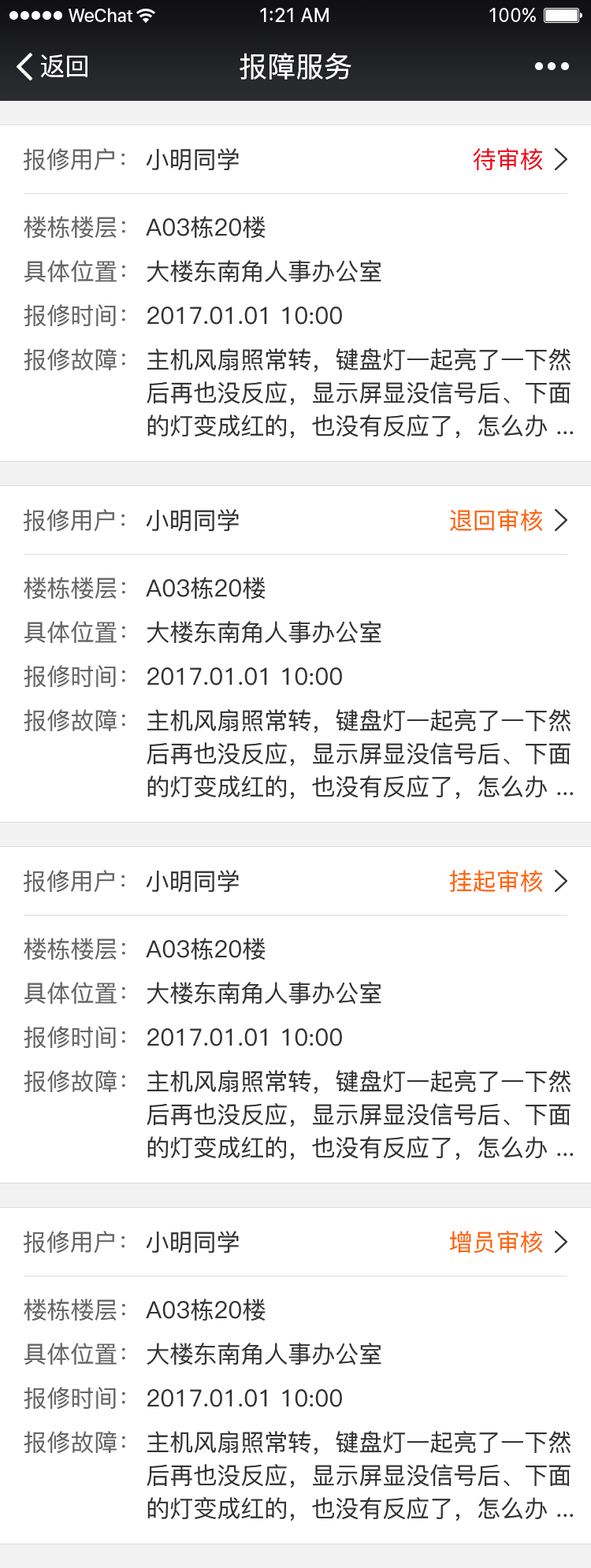
<style>
.page{position:relative;width:591px;height:1568px;background:#ffffff}
.page>*{position:absolute;margin:0}
.t1{font:28.4px "PingFang-SC-Medium";color:#ffffff}
.t2{font:25.2px "PingFang-SC-Medium";color:#ffffff}
.t3{font:23.6px "PingFang-SC-Medium";color:#666666}
.t4{font:23.6px "PingFang-SC-Medium";color:#333333}
.t5{font:23.6px "PingFang-SC-Medium";color:#f10215}
.t6{font:23.6px/44.1px "PingFang-SC-Medium";color:#666666}
.t7{font:23.6px/44.1px "PingFang-SC-Medium";color:#333333}
.t8{font:23.6px/33.1px "PingFang-SC-Medium";color:#333333}
.t9{font:23.6px "PingFang-SC-Medium";color:#ff6405}
</style>
<div class="page">
<p class="t1" style="left:240px;top:53px;width:111px;height:27px">报障服务</p>
<p class="t2" style="left:41px;top:54px;width:46px;height:24px">返回</p>
<p class="t3" style="left:23px;top:148px;width:101px;height:23px">报修用户：</p>
<p class="t4" style="left:146px;top:148px;width:93px;height:23px">小明同学</p>
<p class="t5" style="left:473px;top:148px;width:70px;height:22px">待审核</p>
<p class="t6" style="left:24px;top:216px;width:101px;height:155px">楼栋楼层：<br>具体位置：<br>报修时间：<br>报修故障：</p>
<p class="t7" style="left:146px;top:216px;width:428px;height:222px">A03栋20楼<br>大楼东南角人事办公室<br>2017.01.01 10:00<br>主机风扇照常转，键盘灯一起亮了一下然<br><span class="t8">后再也没反应，显示屏显没信号后、下面<br>的灯变成红的，也没有反应了，怎么办 ...</span></p>
<p class="t3" style="left:23px;top:509px;width:101px;height:23px">报修用户：</p>
<p class="t4" style="left:146px;top:509px;width:93px;height:23px">小明同学</p>
<p class="t9" style="left:450px;top:509px;width:93px;height:22px">退回审核</p>
<p class="t6" style="left:24px;top:577px;width:101px;height:155px">楼栋楼层：<br>具体位置：<br>报修时间：<br>报修故障：</p>
<p class="t7" style="left:146px;top:577px;width:428px;height:222px">A03栋20楼<br>大楼东南角人事办公室<br>2017.01.01 10:00<br>主机风扇照常转，键盘灯一起亮了一下然<br><span class="t8">后再也没反应，显示屏显没信号后、下面<br>的灯变成红的，也没有反应了，怎么办 ...</span></p>
<p class="t3" style="left:23px;top:870px;width:101px;height:23px">报修用户：</p>
<p class="t4" style="left:146px;top:870px;width:93px;height:23px">小明同学</p>
<p class="t9" style="left:450px;top:870px;width:93px;height:22px">挂起审核</p>
<p class="t6" style="left:24px;top:938px;width:101px;height:155px">楼栋楼层：<br>具体位置：<br>报修时间：<br>报修故障：</p>
<p class="t7" style="left:146px;top:938px;width:428px;height:222px">A03栋20楼<br>大楼东南角人事办公室<br>2017.01.01 10:00<br>主机风扇照常转，键盘灯一起亮了一下然<br><span class="t8">后再也没反应，显示屏显没信号后、下面<br>的灯变成红的，也没有反应了，怎么办 ...</span></p>
<p class="t3" style="left:23px;top:1231px;width:101px;height:23px">报修用户：</p>
<p class="t4" style="left:146px;top:1231px;width:93px;height:23px">小明同学</p>
<p class="t9" style="left:450px;top:1231px;width:93px;height:23px">增员审核</p>
<p class="t6" style="left:24px;top:1299px;width:101px;height:155px">楼栋楼层：<br>具体位置：<br>报修时间：<br>报修故障：</p>
<p class="t7" style="left:146px;top:1299px;width:428px;height:222px">A03栋20楼<br>大楼东南角人事办公室<br>2017.01.01 10:00<br>主机风扇照常转，键盘灯一起亮了一下然<br><span class="t8">后再也没反应，显示屏显没信号后、下面<br>的灯变成红的，也没有反应了，怎么办 ...</span></p>
</div>
